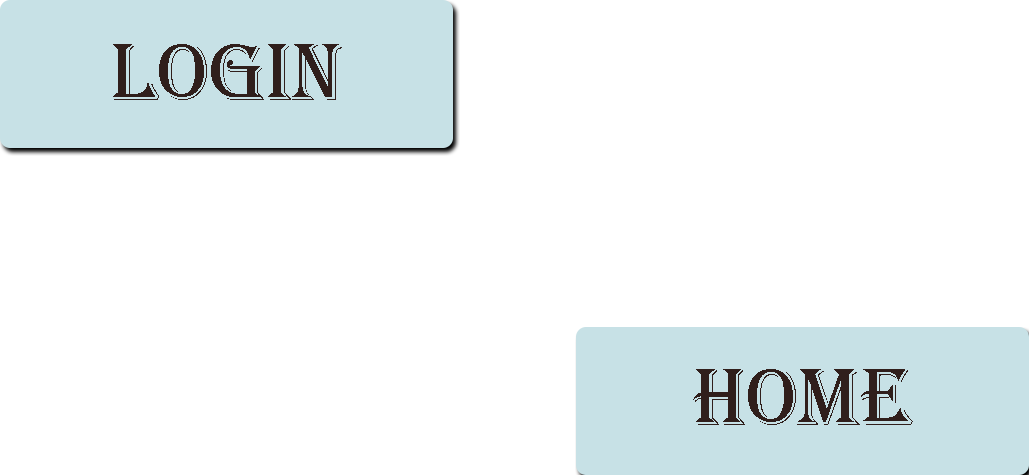
<style>
.page{position:relative;width:1029px;height:475px;background:#ffffff}
.page>*{position:absolute;margin:0}
.t1{font:84px "Algerian";color:#301f1c}
</style>
<div class="page">
<p class="t1" style="left:113px;top:44px;width:229px;height:56px">login</p>
<p class="t1" style="left:693px;top:369px;width:220px;height:56px">home</p>
</div>
